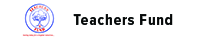
<style>
.page{position:relative;width:200px;height:40px;background:#ffffff}
.page>*{position:absolute;margin:0}
.t1{font:15.5px "ProximaNovaCond-Bold";letter-spacing:0.06em;color:#060808}
</style>
<div class="page">
<p class="t1" style="left:73px;top:14px;width:100px;height:11px">Teachers Fund</p>
</div>
